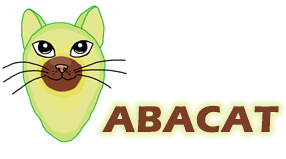
<style>
.page{position:relative;width:286px;height:159px;background:#ffffff}
.page>*{position:absolute;margin:0}
.t1{font:38px "ErasITC-Bold";letter-spacing:0.025em;color:#7a3d27}
</style>
<div class="page">
<p class="t1" style="left:102px;top:105px;width:177px;height:28px">ABACAT</p>
</div>
